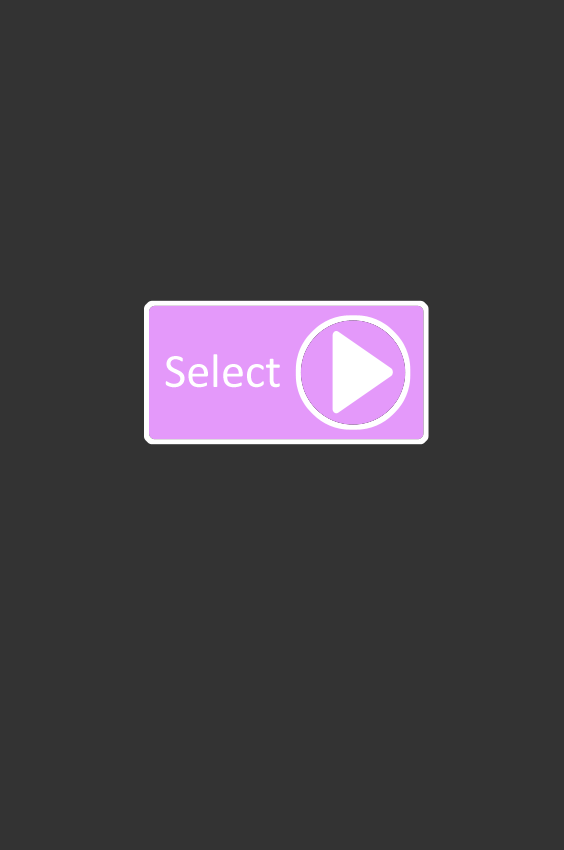
<style>
.page{position:relative;width:564px;height:850px;background:#333333}
.page>*{position:absolute;margin:0}
.t1{font:48px "Calibri";color:#ffffff}
</style>
<div class="page">
<p class="t1" style="left:165px;top:354px;width:115px;height:34px">Select</p>
</div>
